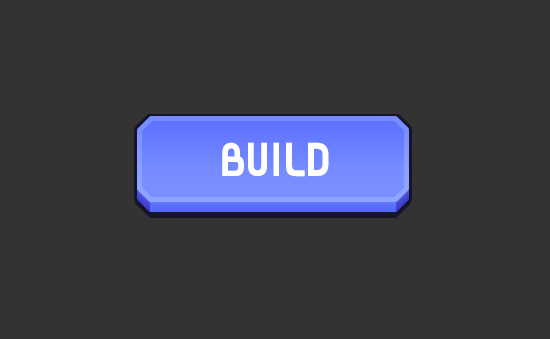
<style>
.page{position:relative;width:550px;height:339px;background:#333333}
.page>*{position:absolute;margin:0}
.t1{font:60px "ahn2006-B";color:#fffefe;text-transform:uppercase}
</style>
<div class="page">
<p class="t1" style="left:222px;top:142px;width:107px;height:35px">Build</p>
</div>
